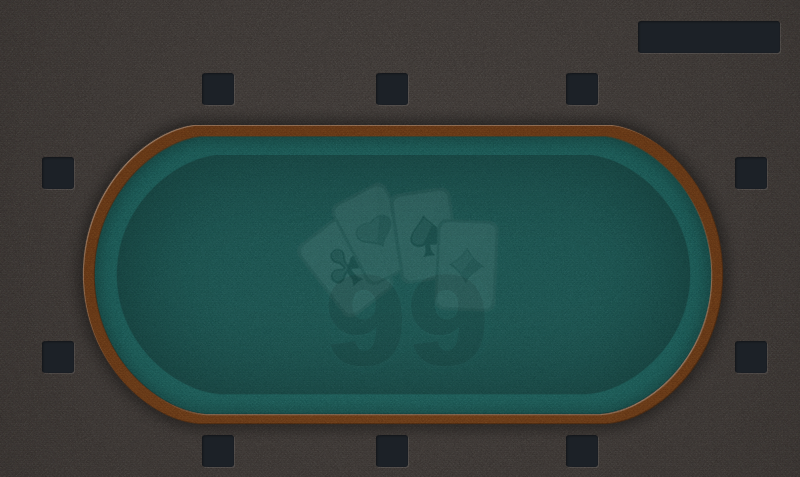
<style>
.page{position:relative;width:800px;height:477px}
.page>*{position:absolute;margin:0}
.t1{font:123.8px "Arial-Black";color:#1d4f4c}
</style>
<div class="page">
<p class="t1" style="left:328px;top:274px;width:157px;height:92px">99</p>
</div>
